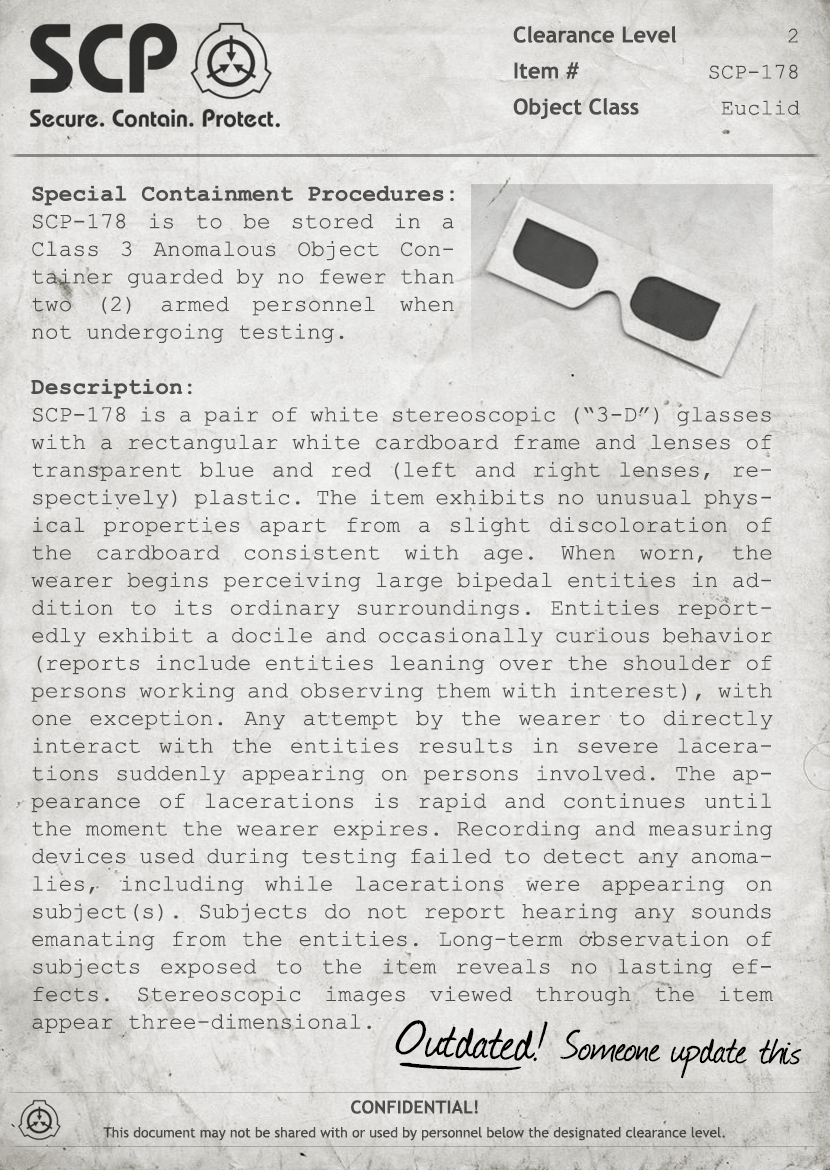
<style>
.page{position:relative;width:830px;height:1170px}
.page>*{position:absolute;margin:0}
.t1{font:22px/18px "TrebuchetMS-Bold";color:#4e4d4d}
.t2{font:22px/18px "CourierNewPSMT";color:#4e4d4d}
.t3{font:23px "CourierNewPSMT";color:#4f4f4e}
.t4{font:23px "CourierNewPS-BoldMT";color:#4f4f4e}
.t5{font:60.9px "Journal";color:#000000}
.t6{font:48.5px "Journal";color:#000000}
.t7{font:218.2px "Journal";color:#000000;scale:0.28 1}
.t8{font:14px/24px "TrebuchetMS";color:#4b4a49}
.t9{font:18px/24px "TrebuchetMS-Bold";color:#4b4a49}
</style>
<div class="page">
<p class="t1" style="left:513px;top:25px;width:287px;height:94px;text-align:right">Clearance Level <span class="t2">2<br><br></span>Item #   <span class="t2">SCP-178<br><br></span>Object Class  <span class="t2">Euclid</span></p>
<p class="t3" style="left:32px;top:185px;width:422px;height:158px;text-align:justify"><span class="t4">Special Containment Procedures:<br></span>SCP-178 is to be stored in a Class 3 Anomalous Object Container guarded by no fewer than two (2) armed personnel when not undergoing testing.</p>
<p class="t3" style="left:31px;top:379px;width:742px;height:654px;text-align:justify"><span class="t4"><br><br><br><br><br><br><br>Description:<br></span>SCP-178 is a pair of white stereoscopic (“3-D”) glasses with a rectangular white cardboard frame and lenses of transparent blue and red (left and right lenses, respectively) plastic. The item exhibits no unusual physical properties apart from a slight discoloration of the cardboard consistent with age. When worn, the wearer begins perceiving large bipedal entities in addition to its ordinary surroundings. Entities reportedly exhibit a docile and occasionally curious behavior (reports include entities leaning over the shoulder of persons working and observing them with interest), with one exception. Any attempt by the wearer to directly interact with the entities results in severe lacerations suddenly appearing on persons involved. The appearance of lacerations is rapid and continues until the moment the wearer expires. Recording and measuring devices used during testing failed to detect any anomalies, including while lacerations were appearing on subject(s). Subjects do not report hearing any sounds emanating from the entities. Long-term observation of subjects exposed to the item reveals no lasting effects. Stereoscopic images viewed through the item appear three-dimensional.</p>
<p class="t5" style="left:395px;top:1020px;width:153px;height:42px;rotate:2deg">Outdated!</p>
<p class="t6" style="left:560px;top:1029px;width:242px;height:50px;rotate:1deg">Someone update this</p>
<p class="t7" style="left:399px;top:1062px;width:123px;height:9px;rotate:-92deg">I</p>
<p class="t8" style="left:103px;top:1100px;width:622px;height:41px;text-align:center"><span class="t9">CONFIDENTIAL! <br></span>This document may not be shared with or used by personnel below the designated clearance level.</p>
</div>
